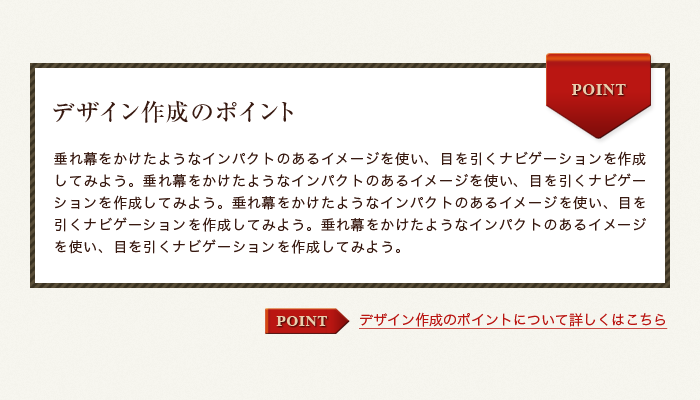
<style>
.page{position:relative;width:700px;height:400px;background:#ffffff}
.page>*{position:absolute;margin:0}
.t1{font:16px "Times-Bold";letter-spacing:0.06em;color:#eacdac}
.t2{font:24px "RyuminPro-Medium";letter-spacing:0.02em;color:#381a11}
.t3{font:14px/22px "HiraKakuProN-W3";letter-spacing:0.06em;color:#381a11}
.t4{font:15px "Times-Bold";letter-spacing:0.06em;color:#eacdac}
.t5{font:14px "HiraKakuProN-W3";color:#ba1612;text-decoration:underline}
</style>
<div class="page">
<p class="t1" style="left:572px;top:84px;width:54px;height:11px">POINT</p>
<p class="t2" style="left:53px;top:100px;width:240px;height:23px">デザイン作成のポイント</p>
<p class="t3" style="left:54px;top:151px;width:592px;height:103px">垂れ幕をかけたようなインパクトのあるイメージを使い、目を引くナビゲーションを作成してみよう。垂れ幕をかけたようなインパクトのあるイメージを使い、目を引くナビゲーションを作成してみよう。垂れ幕をかけたようなインパクトのあるイメージを使い、目を引くナビゲーションを作成してみよう。垂れ幕をかけたようなインパクトのあるイメージを使い、目を引くナビゲーションを作成してみよう。</p>
<p class="t4" style="left:276px;top:316px;width:52px;height:10px">POINT</p>
<p class="t5" style="left:359px;top:312px;width:309px;height:17px">デザイン作成のポイントについて詳しくはこちら</p>
</div>
